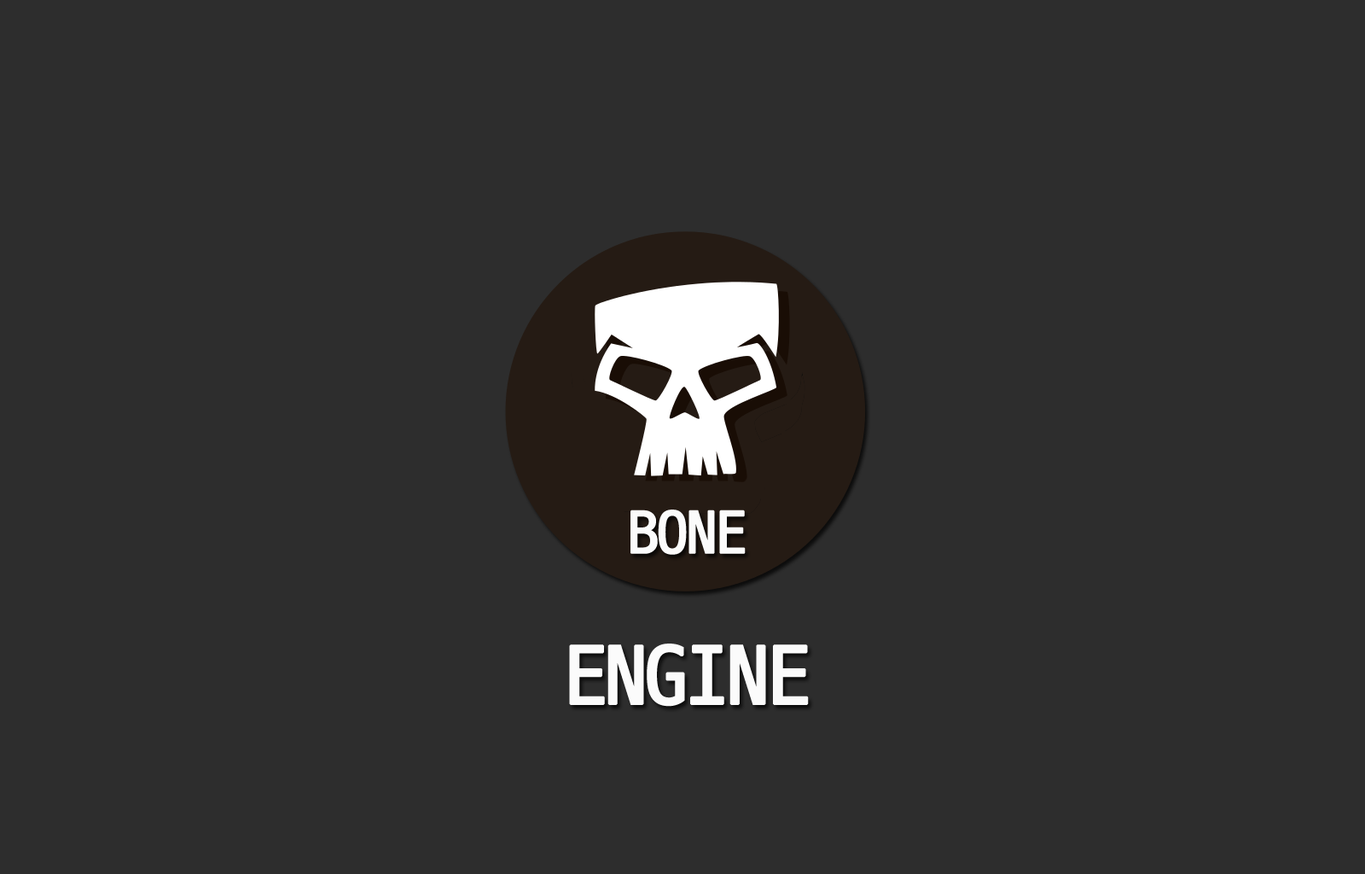
<style>
.page{position:relative;width:1365px;height:874px;background:#2d2d2d}
.page>*{position:absolute;margin:0}
.t1{font:61.4px "D2Coding";letter-spacing:-0.05em;color:#fbfbfb;font-weight:bold}
.t2{font:85.3px "D2Coding";letter-spacing:-0.05em;color:#fbfbfb;font-weight:bold}
</style>
<div class="page">
<p class="t1" style="left:630px;top:509px;width:116px;height:46px">BONE</p>
<p class="t2" style="left:569px;top:643px;width:240px;height:63px">ENGINE</p>
</div>
